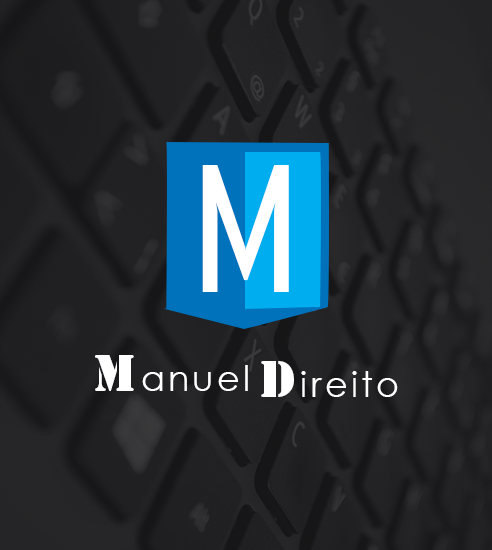
<style>
.page{position:relative;width:492px;height:550px}
.page>*{position:absolute;margin:0}
.t1{font:165.6px "AgencyFB-Reg";letter-spacing:0.1em;color:#ffffff;scale:1.37 1}
.t2{font:34.7px "CenturyGothic";letter-spacing:0.1em;color:#ffffff}
.t3{font:48.6px "StencilStd";letter-spacing:0.1em;color:#ffffff}
</style>
<div class="page">
<p class="t1" style="left:202px;top:165px;width:87px;height:127px">M</p>
<p class="t2" style="left:95px;top:355px;width:153px;height:36px"><span class="t3">M</span>anuel</p>
<p class="t2" style="left:261px;top:361px;width:137px;height:36px"><span class="t3">D</span>ireito</p>
</div>
